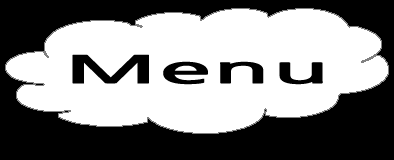
<style>
.page{position:relative;width:394px;height:160px;background:#ffffff}
.page>*{position:absolute;margin:0}
.t1{font:38px "NanumGothicBold";color:#000000;scale:2.57 1}
</style>
<div class="page">
<p class="t1" style="left:72px;top:54px;width:251px;height:31px">Menu</p>
</div>
